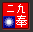
<style>
.page{position:relative;width:33px;height:32px;background:#f20000}
.page>*{position:absolute;margin:0}
.t1{font:10.4px "SimSun";color:#ffffff}
.t2{font:11.7px "SimSun";color:#ffffff}
</style>
<div class="page">
<p class="t1" style="left:7px;top:4px;width:18px;height:9px">二九</p>
<p class="t2" style="left:16px;top:15px;width:11px;height:12px">奉</p>
</div>
